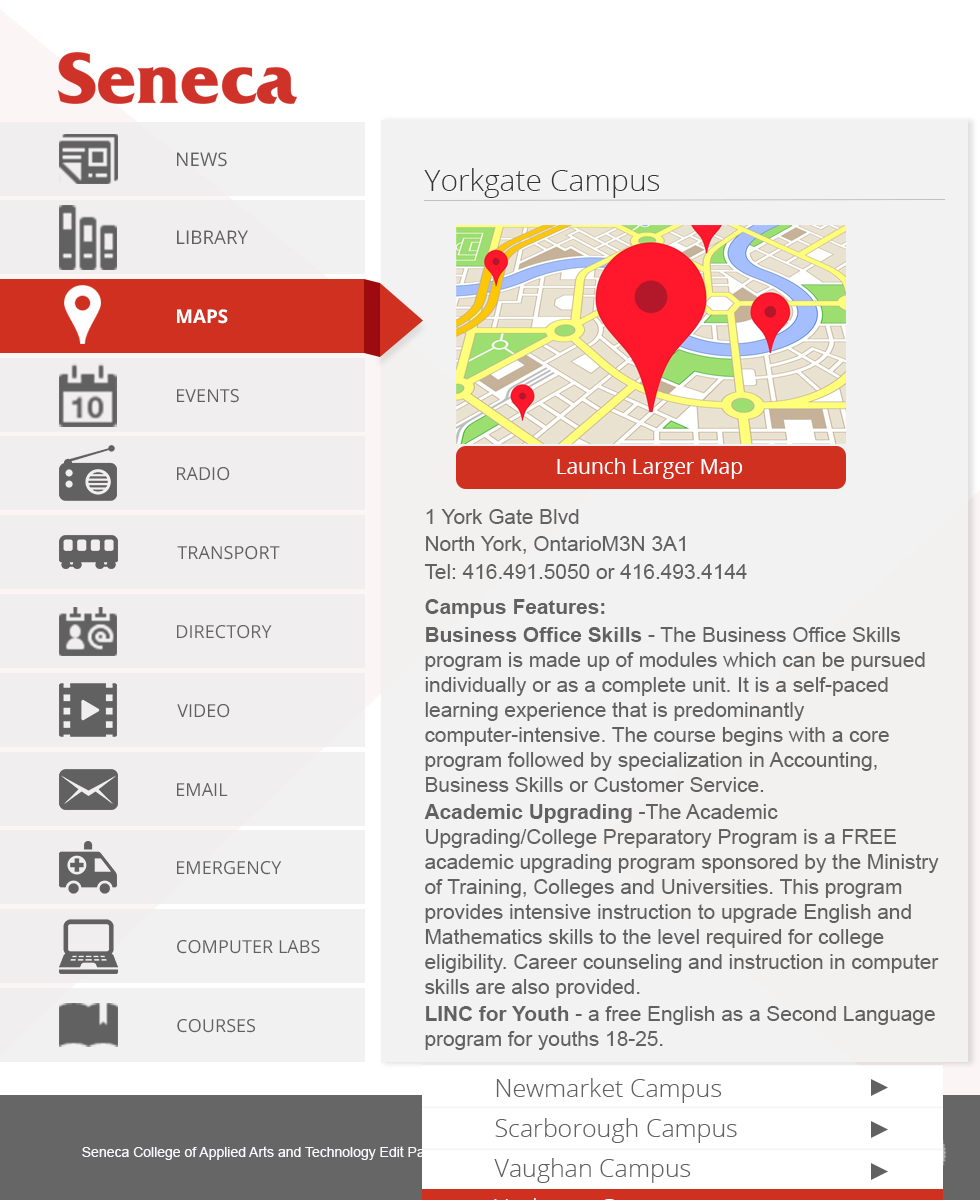
<style>
.page{position:relative;width:980px;height:1200px;background:#f3f2f2}
.page>*{position:absolute;margin:0}
.t1{font:30px "OpenSans-Light";color:#333333}
.t2{font:20.8px/25px "ArialMT";color:#616161}
.t3{font:20.8px "ArialMT";color:#616161}
.t4{font:20.8px "Arial-BoldMT";color:#616161}
</style>
<div class="page">
<p class="t1" style="left:424px;top:168px;width:236px;height:30px">Yorkgate Campus</p>
<p class="t2" style="left:424px;top:509px;width:323px;height:70px">1 York Gate Blvd<br>North York, OntarioM3N 3A1<br>Tel: 416.491.5050 or 416.493.4144</p>
<p class="t3" style="left:424px;top:599px;width:515px;height:451px"><span class="t4">Campus Features:<br>Business Office Skills </span>- The Business Office Skills program is made up of modules which can be pursued individually or as a complete unit. It is a self-paced learning experience that is predominantly computer-intensive. The course begins with a core program followed by specialization in Accounting, Business Skills or Customer Service.<br><span class="t4">Academic Upgrading </span>-The Academic Upgrading/College Preparatory Program is a FREE academic upgrading program sponsored by the Ministry of Training, Colleges and Universities. This program provides intensive instruction to upgrade English and Mathematics skills to the level required for college eligibility. Career counseling and instruction in computer skills are also provided.<br><span class="t4">LINC for Youth </span>- a free English as a Second Language program for youths 18-25.</p>
</div>
